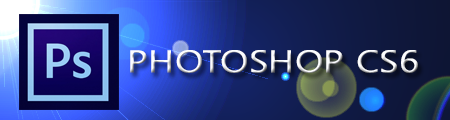
<style>
.page{position:relative;width:450px;height:120px}
.page>*{position:absolute;margin:0}
.t1{font:31px "NirmalaUI-Semilight";color:#fcfdff;font-weight:bold;scale:1.18 1}
</style>
<div class="page">
<p class="t1" style="left:130px;top:50px;width:288px;height:23px">PHOTOSHOP CS6</p>
</div>
